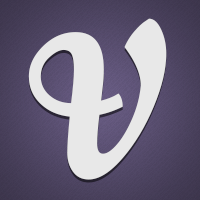
<style>
.page{position:relative;width:200px;height:200px;background:#e8e8e8}
.page>*{position:absolute;margin:0}
.t1{font:204.4px "OleoScriptSwashCaps-Regular";color:#e8e8e8;scale:0.93 1}
</style>
<div class="page">
<p class="t1" style="left:28px;top:18px;width:139px;height:162px">V</p>
</div>
